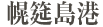
<style>
.page{position:relative;width:103px;height:27px;background:#ffffff}
.page>*{position:absolute;margin:0}
.t1{font:26px "RyuminPro-ExBold";color:#4c4843;scale:0.9 1}
</style>
<div class="page">
<p class="t1" style="left:7px;top:0px;width:93px;height:26px">幌筵島港</p>
</div>
